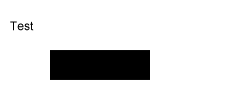
<style>
.page{position:relative;width:230px;height:100px;background:#ffffff}
.page>*{position:absolute;margin:0}
.t1{font:12px "ArialMT";color:#000000}
</style>
<div class="page">
<p class="t1" style="left:10px;top:21px;width:24px;height:10px">Test</p>
</div>
